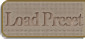
<style>
.page{position:relative;width:85px;height:39px}
.page>*{position:absolute;margin:0}
.t1{font:18px "RyuminPro-ExBold";letter-spacing:-0.12em;color:#8b7464;font-weight:bold;scale:0.9 1}
</style>
<div class="page">
<p class="t1" style="left:5px;top:12px;width:79px;height:14px">Load Preset</p>
</div>
